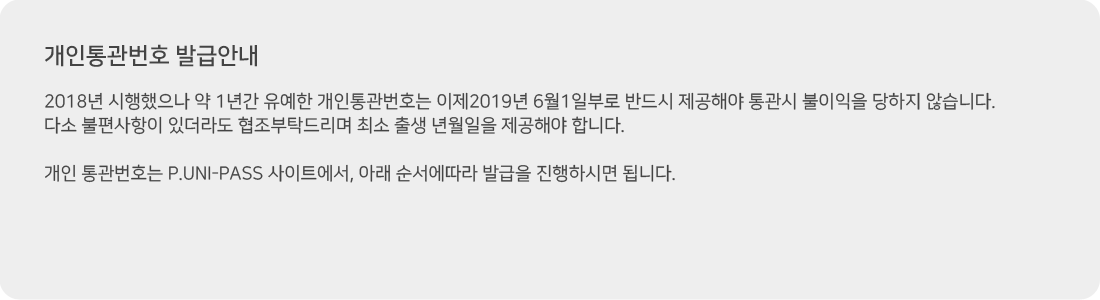
<style>
.page{position:relative;width:1100px;height:300px;background:#eeeeee}
.page>*{position:absolute;margin:0}
.t1{font:18px/24px "NanumSquareR";color:#444444}
.t2{font:23px/24px "NanumSquareB";color:#444444}
</style>
<div class="page">
<p class="t1" style="left:45px;top:44px;width:950px;height:139px"><span class="t2">개인통관번호 발급안내<br></span><br>2018년 시행했으나 약 1년간 유예한 개인통관번호는 이제2019년 6월1일부로 반드시 제공해야 통관시 불이익을 당하지 않습니다.<br>다소 불편사항이 있더라도 협조부탁드리며 최소 출생 년월일을 제공해야 합니다.<br><br>개인 통관번호는 P.UNI-PASS 사이트에서, 아래 순서에따라 발급을 진행하시면 됩니다.</p>
</div>
